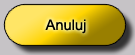
<style>
.page{position:relative;width:135px;height:55px}
.page>*{position:absolute;margin:0}
.t1{font:14.7px "ArialMT";color:#000000}
</style>
<div class="page">
<p class="t1" style="left:45px;top:19px;width:41px;height:15px">Anuluj</p>
</div>
